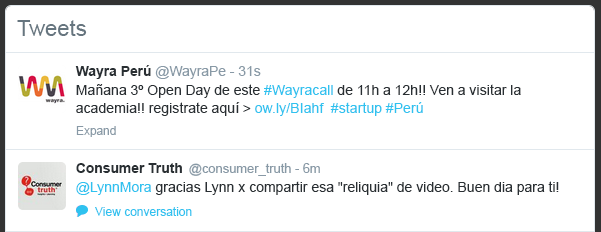
<style>
.page{position:relative;width:601px;height:232px;background:#ffffff}
.page>*{position:absolute;margin:0}
.t1{font:22px "ArialMT";color:#66757f}
.t2{font:14px "ArialMT";letter-spacing:-0.005em;color:#8899a6}
.t3{font:14px "Arial-BoldMT";letter-spacing:-0.005em;color:#292f33}
.t4{font:14px/18px "ArialMT";letter-spacing:-0.005em;color:#292f33}
.t5{font:14px/18px "ArialMT";letter-spacing:-0.005em;color:#2fc2ef}
.t6{font:12px "ArialMT";letter-spacing:-0.005em;color:#8899a6}
.t7{font:13px "ArialMT";letter-spacing:-0.005em;color:#8899a6}
.t8{font:14px "ArialMT";color:#292f33}
.t9{font:14px "ArialMT";color:#2fc2ef}
.t10{font:12px "ArialMT";color:#2fc2ef}
</style>
<div class="page">
<p class="t1" style="left:17px;top:20px;width:70px;height:16px">Tweets</p>
<p class="t2" style="left:75px;top:65px;width:186px;height:14px"><span class="t3">Wayra Perú </span>@WayraPe - 31s</p>
<p class="t4" style="left:76px;top:84px;width:445px;height:32px">Mañana 3º Open Day de este <span class="t5">#Wayracall</span> de 11h a 12h!! Ven a visitar la academia!! registrate aquí &gt; <span class="t5">ow.ly/BIahf  #startup #Perú</span></p>
<p class="t6" style="left:76px;top:126px;width:40px;height:11px">Expand</p>
<p class="t7" style="left:76px;top:163px;width:244px;height:13px"><span class="t3">Consumer Truth  </span>@consumer_truth - 6m</p>
<p class="t8" style="left:76px;top:181px;width:483px;height:14px"><span class="t9">@LynnMora</span> gracias Lynn x compartir esa "reliquia" de video. Buen dia para ti!</p>
<p class="t10" style="left:95px;top:207px;width:97px;height:9px">View conversation</p>
</div>
